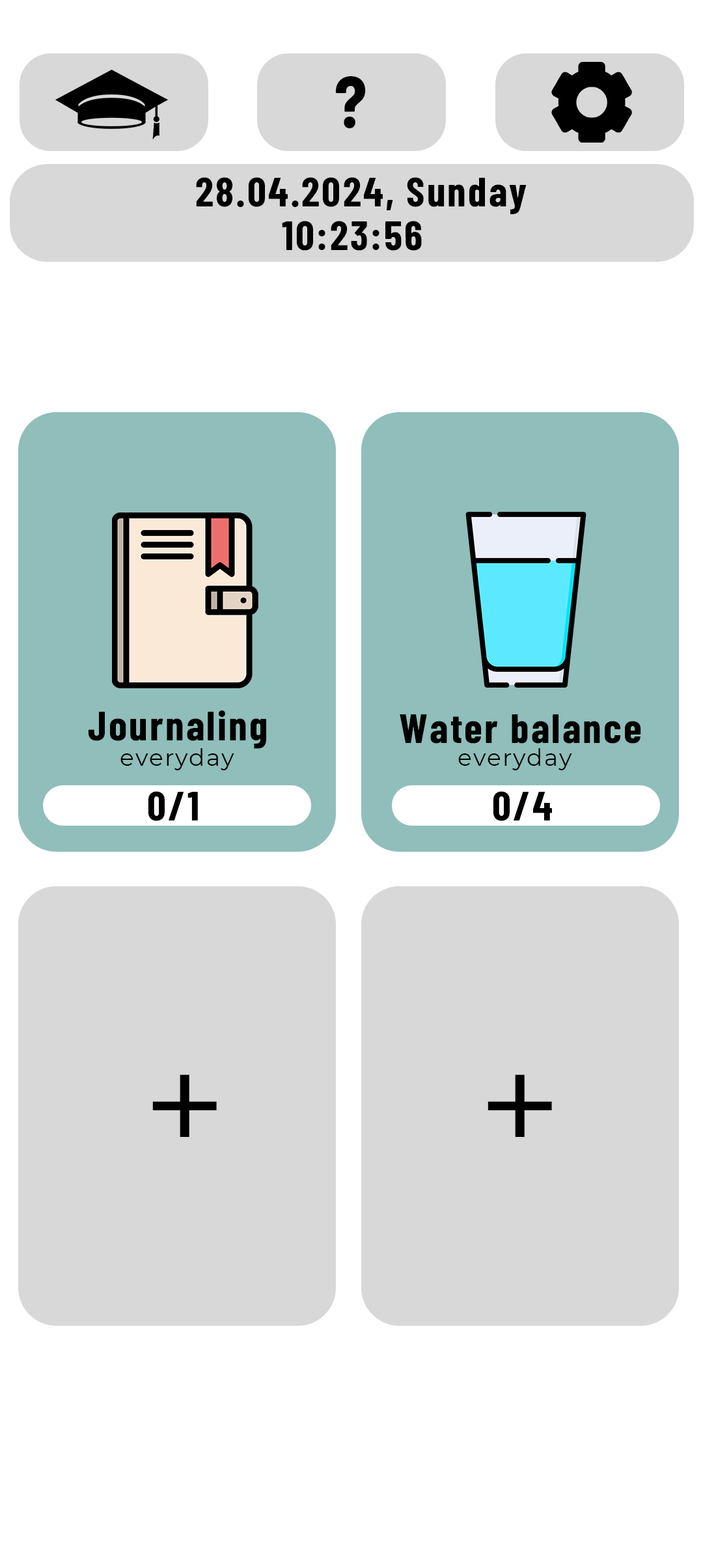
<style>
.page{position:relative;width:703px;height:1568px;background:#ffffff}
.page>*{position:absolute;margin:0}
.t1{font:73.3px "BarlowCondensed-Bold";letter-spacing:0.05em;color:#000000}
.t2{font:41.5px "BarlowCondensed-Bold";letter-spacing:0.05em;color:#000000}
.t3{font:23.4px "Montserrat-Regular";letter-spacing:0.05em;color:#000000}
.t4{font:146.5px "Montserrat-Regular";letter-spacing:0.05em;color:#000000}
</style>
<div class="page">
<p class="t1" style="left:335px;top:76px;width:31px;height:52px">?</p>
<p class="t2" style="left:196px;top:177px;width:331px;height:37px">28.04.2024, Sunday</p>
<p class="t2" style="left:282px;top:221px;width:140px;height:30px">10:23:56</p>
<p class="t2" style="left:88px;top:710px;width:178px;height:39px">Journaling</p>
<p class="t2" style="left:400px;top:714px;width:241px;height:30px">Water balance</p>
<p class="t3" style="left:120px;top:748px;width:114px;height:22px">everyday</p>
<p class="t3" style="left:458px;top:748px;width:114px;height:22px">everyday</p>
<p class="t2" style="left:148px;top:791px;width:50px;height:30px">0/1</p>
<p class="t2" style="left:493px;top:791px;width:59px;height:30px">0/4</p>
<p class="t4" style="left:152px;top:1074px;width:65px;height:63px">+</p>
<p class="t4" style="left:488px;top:1074px;width:64px;height:63px">+</p>
</div>
